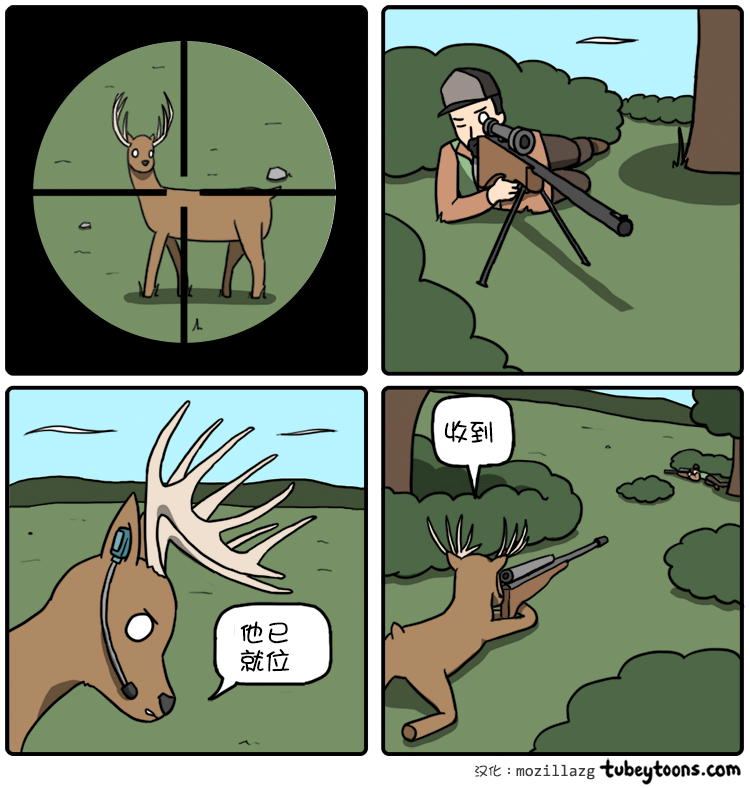
<style>
.page{position:relative;width:750px;height:788px;background:#779066}
.page>*{position:absolute;margin:0}
.t1{font:26px "DFGirl";color:#000000}
.t2{font:26px/28px "DFGirl";color:#000000}
</style>
<div class="page">
<p class="t1" style="left:445px;top:420px;width:48px;height:23px">收到</p>
<p class="t2" style="left:240px;top:621px;width:50px;height:51px">他已<br>就位</p>
</div>
